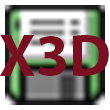
<style>
.page{position:relative;width:110px;height:110px;background:#ffffff}
.page>*{position:absolute;margin:0}
.t1{font:60px "MyriadPro-Bold";color:#7a0f21}
</style>
<div class="page">
<p class="t1" style="left:0px;top:35px;width:109px;height:41px">X3D</p>
</div>
